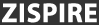
<style>
.page{position:relative;width:99px;height:25px;background:#333333}
.page>*{position:absolute;margin:0}
.t1{font:27px "MyriadPro-Bold";color:#ffffff;font-weight:bold}
</style>
<div class="page">
<p class="t1" style="left:2px;top:3px;width:95px;height:20px">ZISPIRE</p>
</div>
